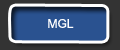
<style>
.page{position:relative;width:120px;height:50px;background:#2a5290}
.page>*{position:absolute;margin:0}
.t1{font:12px "ArialMT";color:#ffffff}
</style>
<div class="page">
<p class="t1" style="left:48px;top:19px;width:26px;height:9px">MGL</p>
</div>
